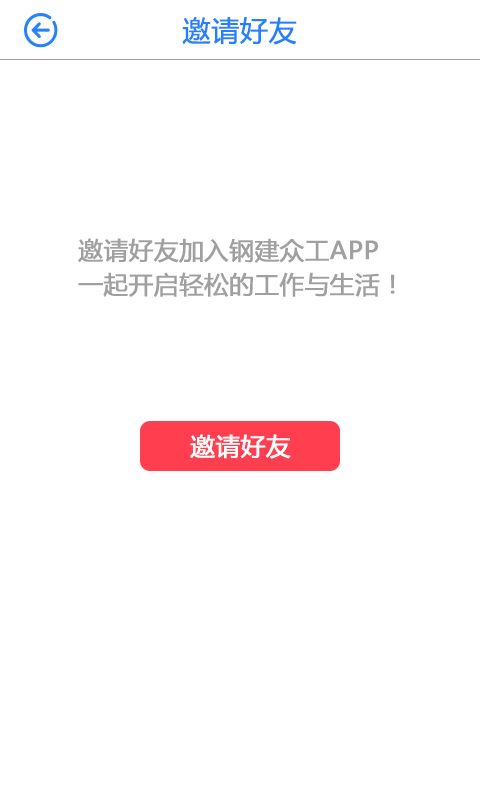
<style>
.page{position:relative;width:480px;height:800px;background:#ffffff}
.page>*{position:absolute;margin:0}
.t1{font:28px "MicrosoftYaHei";color:#2681fc;font-weight:bold}
.t2{font:24.5px/34.1px "MicrosoftYaHei";color:#a0a0a0;font-weight:bold}
.t3{font:24.5px "MicrosoftYaHei";color:#ffffff;font-weight:bold}
</style>
<div class="page">
<p class="t1" style="left:182px;top:17px;width:115px;height:28px">邀请好友</p>
<p class="t2" style="left:78px;top:238px;width:317px;height:59px">邀请好友加入钢建众工APP<br>一起开启轻松的工作与生活！</p>
<p class="t3" style="left:190px;top:434px;width:101px;height:25px">邀请好友</p>
</div>
